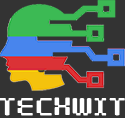
<style>
.page{position:relative;width:125px;height:118px;background:#333333}
.page>*{position:absolute;margin:0}
.t1{font:23.4px "Amoebic";color:#ffffff;font-weight:bold;scale:1.44 1}
</style>
<div class="page">
<p class="t1" style="left:0px;top:97px;width:125px;height:19px">TECHWIT</p>
</div>
